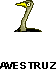
<style>
.page{position:relative;width:56px;height:69px;background:#ffffff}
.page>*{position:absolute;margin:0}
.t1{font:10.3px "Arial-BoldMT";color:#000000;scale:1.11 1}
</style>
<div class="page">
<p class="t1" style="left:0px;top:62px;width:56px;height:7px">AVESTRUZ</p>
</div>
